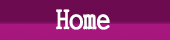
<style>
.page{position:relative;width:170px;height:40px;background:#6c0b50}
.page>*{position:absolute;margin:0}
.t1{font:27px "GungsuhChe";color:#ffffff}
</style>
<div class="page">
<p class="t1" style="left:56px;top:9px;width:54px;height:21px">Home</p>
</div>
